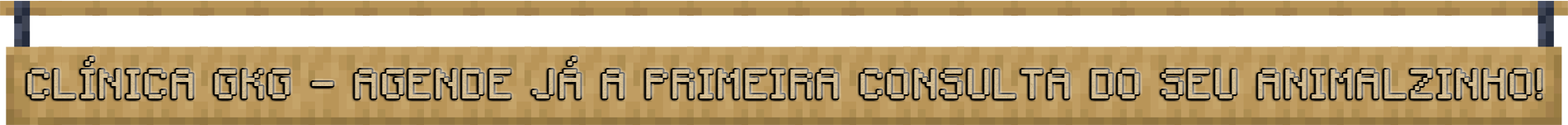
<style>
.page{position:relative;width:1568px;height:125px;background:#ffffff}
.page>*{position:absolute;margin:0}
.t1{font:37.1px "Minecraft";color:#d4bd92}
</style>
<div class="page">
<p class="t1" style="left:27px;top:57px;width:1515px;height:41px">CLÍNICA GKG - AGENDE JÁ A PRIMEIRA CONSULTA DO SEU ANIMALZINHO!</p>
</div>
